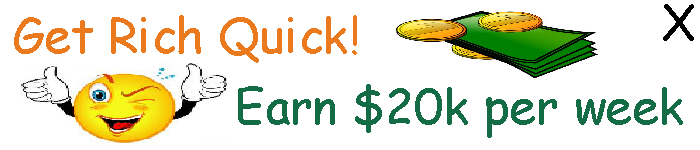
<style>
.page{position:relative;width:700px;height:150px;background:#ffffff}
.page>*{position:absolute;margin:0}
.t1{font:48px "ComicSansMS";color:#000000}
.t2{font:48px "ComicSansMS";color:#eb791d}
.t3{font:48px "ComicSansMS";color:#136c45}
</style>
<div class="page">
<p class="t1" style="left:663px;top:4px;width:31px;height:37px">X</p>
<p class="t2" style="left:14px;top:15px;width:343px;height:48px">Get Rich Quick!</p>
<p class="t3" style="left:238px;top:84px;width:445px;height:54px">Earn $20k per week</p>
</div>
